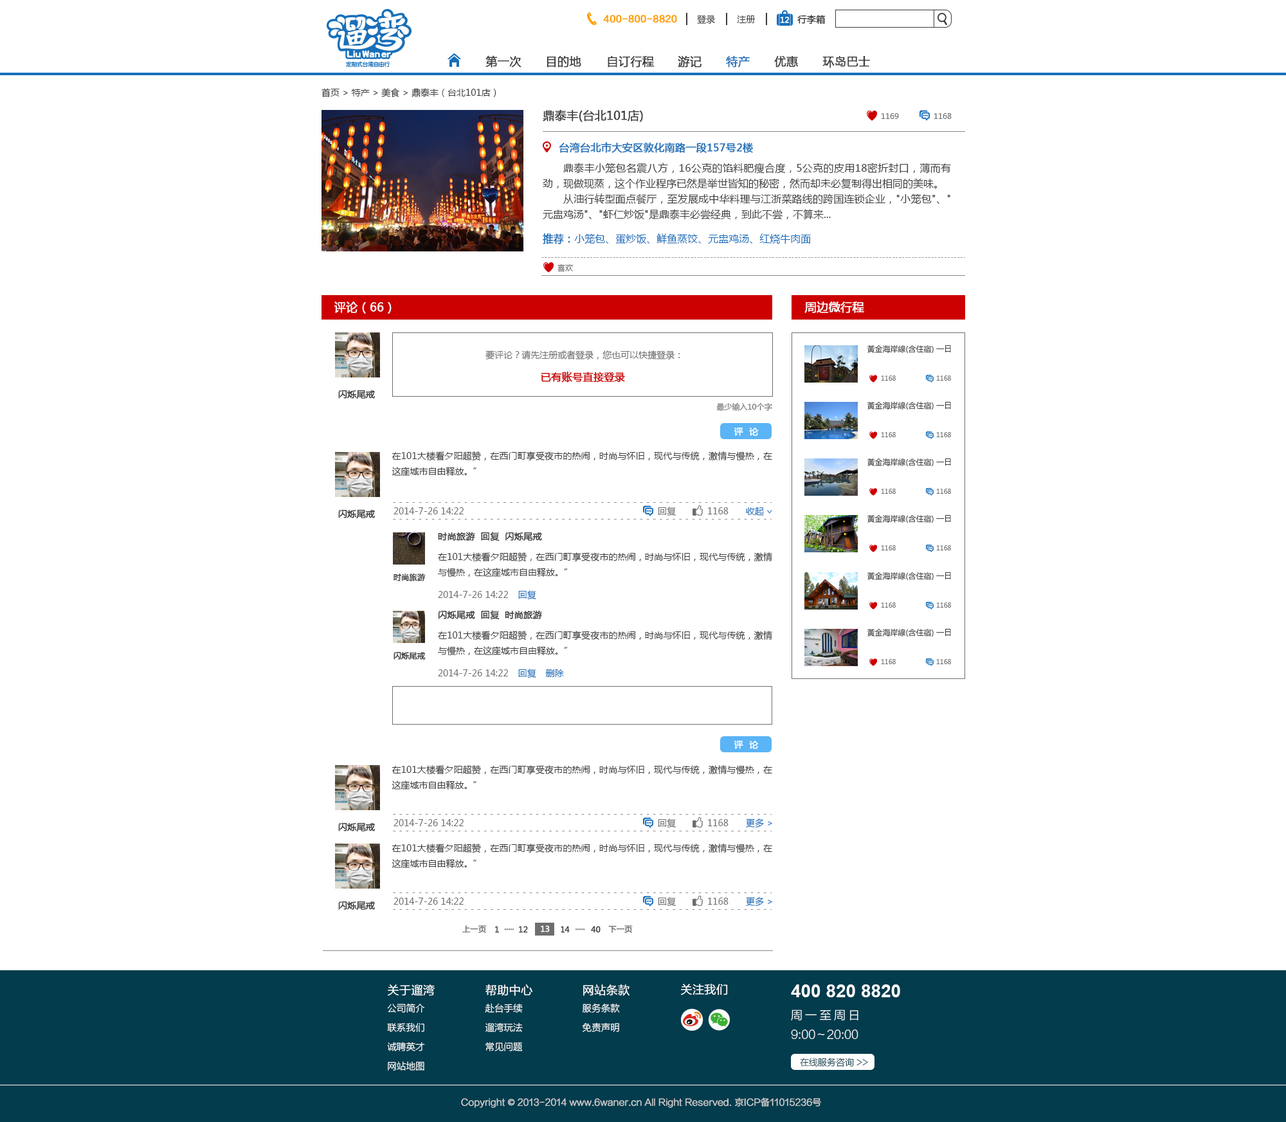
<style>
.page{position:relative;width:1286px;height:1122px;background:#ffffff}
.page>*{position:absolute;margin:0}
.t1{font:9px "FZLTZHK--GBK1-0";color:#ffa000;font-weight:bold}
.t2{font:9px "MicrosoftYaHei";color:#3c3c3c}
.t3{font:7.7px "MicrosoftYaHei";color:#fefefe;font-weight:bold}
.t4{font:9px "MicrosoftYaHei";color:#3c3c3c;font-weight:bold}
.t5{font:11.6px "MicrosoftYaHei";color:#3c3c3c;font-weight:bold}
.t6{font:11.6px "MicrosoftYaHei";color:#176fbb;font-weight:bold}
.t7{font:11.6px "MicrosoftYaHei";color:#3d3d3d;font-weight:bold}
.t8{font:7.7px "MicrosoftYaHei";color:#6e6e6e}
.t9{font:10.3px "MicrosoftYaHei";color:#1f71b9;font-weight:bold}
.t10{font:10.3px/15.4px "MicrosoftYaHei";color:#3d3d3d}
.t11{font:10.3px "MicrosoftYaHei";color:#176fbb}
.t12{font:11.6px "MicrosoftYaHei";color:#fefefe;font-weight:bold}
.t13{font:9px "MicrosoftYaHei";color:#6e6e6e}
.t14{font:7.7px "MicrosoftYaHei";color:#3c3c3c}
.t15{font:10.3px "MicrosoftYaHei";color:#cc0000;font-weight:bold}
.t16{font:6.4px "MicrosoftYaHei";color:#6e6e6e}
.t17{font:9px "MicrosoftYaHei";color:#ffffff;font-weight:bold}
.t18{font:9px/15.4px "MicrosoftYaHei";color:#3c3c3c}
.t19{font:9px "MicrosoftYaHei";color:#176fbb}
.t20{font:9.8px "MicrosoftYaHei";scale:0.71 1}
.t21{font:7.7px "MicrosoftYaHei";color:#3c3c3c;font-weight:bold}
.t22{font:7.7px "MicrosoftYaHei";color:#6e6e6e;font-weight:bold}
.t23{font:7.8px "MicrosoftYaHei";color:#3c3c3c;font-weight:bold}
.t24{font:7.7px "MicrosoftYaHei";color:#6e6e6e;font-weight:bold;scale:0.94 1}
.t25{font:7.7px "MicrosoftYaHei";color:#ffffff;font-weight:bold}
.t26{font:7.8px "MicrosoftYaHei";color:#3c3c3c;font-weight:bold;scale:0.97 1}
.t27{font:9.3px/19.3px "FZLTXHK--GBK1-0";color:#ffffff}
.t28{font:11.6px/19.3px "FZLTXHK--GBK1-0";color:#ffffff;font-weight:bold}
.t29{font:11.6px "FZLTXHK--GBK1-0";color:#ffffff;font-weight:bold}
.t30{font:18px "Arial-BoldMT";color:#ffffff}
.t31{font:11.6px/19.3px "FZLTXHK--GBK1-0";color:#ffffff}
.t32{font:11.6px/19.3px "FZLTXHK--GBK1-0";letter-spacing:0.24em;color:#ffffff}
.t33{font:9px "FZLTXHK--GBK1-0"}
.t34{font:9px "FZLTXHK--GBK1-0";color:#d0d0d0;font-weight:bold}
.t35{font:9px "AdobeHeitiStd-Regular";color:#d0d0d0;font-weight:bold}
</style>
<div class="page">
<p class="t1" style="left:603px;top:15px;width:74px;height:8px">400-800-8820</p>
<p class="t2" style="left:697px;top:15px;width:18px;height:9px">登录</p>
<p class="t2" style="left:737px;top:15px;width:18px;height:8px">注册</p>
<p class="t3" style="left:780px;top:17px;width:9px;height:6px">12</p>
<p class="t4" style="left:797px;top:15px;width:28px;height:9px">行李箱</p>
<p class="t5" style="left:485px;top:55px;width:36px;height:13px">第一次</p>
<p class="t5" style="left:546px;top:56px;width:35px;height:12px">目的地</p>
<p class="t5" style="left:608px;top:56px;width:46px;height:12px">自订行程</p>
<p class="t5" style="left:678px;top:56px;width:23px;height:12px">游记</p>
<p class="t6" style="left:726px;top:56px;width:24px;height:12px">特产</p>
<p class="t5" style="left:774px;top:56px;width:24px;height:12px">优惠</p>
<p class="t5" style="left:822px;top:56px;width:48px;height:12px">环岛巴士</p>
<p class="t2" style="left:321px;top:88px;width:175px;height:10px">首页 &gt; 特产 &gt; 美食 &gt; 鼎泰丰（台北101店）</p>
<p class="t7" style="left:543px;top:109px;width:100px;height:13px">鼎泰丰(台北101店)</p>
<p class="t8" style="left:881px;top:113px;width:18px;height:6px">1169</p>
<p class="t8" style="left:933px;top:113px;width:18px;height:6px">1168</p>
<p class="t9" style="left:559px;top:142px;width:194px;height:11px">台湾台北市大安区敦化南路一段157号2楼</p>
<p class="t10" style="left:543px;top:163px;width:408px;height:57px;text-align:justify">鼎泰丰小笼包名震八方，16公克的馅料肥瘦合度，5公克的皮用18密折封口，薄而有劲，现做现蒸，这个作业程序已然是举世皆知的秘密，然而却未必复制得出相同的美味。<br>从油行转型面点餐厅，至发展成中华料理与江浙菜路线的跨国连锁企业，"小笼包"、"元盅鸡汤"、"虾仁炒饭"是鼎泰丰必尝经典，到此不尝，不算来...</p>
<p class="t11" style="left:543px;top:233px;width:268px;height:11px"><span class="t9">推荐：</span>小笼包、蛋炒饭、鲜鱼蒸饺、元盅鸡汤、红烧牛肉面</p>
<p class="t8" style="left:557px;top:264px;width:16px;height:8px">喜欢</p>
<p class="t12" style="left:334px;top:302px;width:58px;height:12px">评论（66）</p>
<p class="t12" style="left:804px;top:302px;width:60px;height:11px">周边微行程</p>
<p class="t13" style="left:485px;top:350px;width:195px;height:9px">要评论？请先注册或者登录，您也可以快捷登录：</p>
<p class="t14" style="left:867px;top:345px;width:84px;height:8px">黃金海岸線(含住宿) 一日</p>
<p class="t15" style="left:541px;top:372px;width:84px;height:10px">已有账号直接登录</p>
<p class="t16" style="left:881px;top:375px;width:15px;height:6px">1168</p>
<p class="t16" style="left:936px;top:375px;width:15px;height:6px">1168</p>
<p class="t4" style="left:338px;top:390px;width:37px;height:9px">闪烁尾戒</p>
<p class="t14" style="left:867px;top:401px;width:84px;height:9px">黃金海岸線(含住宿) 一日</p>
<p class="t8" style="left:716px;top:402px;width:56px;height:9px">最少输入10个字</p>
<p class="t17" style="left:734px;top:428px;width:25px;height:8px">评  论</p>
<p class="t16" style="left:881px;top:432px;width:15px;height:5px">1168</p>
<p class="t16" style="left:936px;top:432px;width:15px;height:5px">1168</p>
<p class="t18" style="left:392px;top:451px;width:380px;height:25px;text-align:justify">在101大楼看夕阳超赞，在西门町享受夜市的热闹，时尚与怀旧，现代与传统，激情与慢热，在这座城市自由释放。”</p>
<p class="t14" style="left:867px;top:458px;width:84px;height:8px">黃金海岸線(含住宿) 一日</p>
<p class="t16" style="left:881px;top:489px;width:15px;height:5px">1168</p>
<p class="t16" style="left:936px;top:489px;width:15px;height:5px">1168</p>
<p class="t4" style="left:338px;top:509px;width:37px;height:10px">闪烁尾戒</p>
<p class="t13" style="left:393px;top:507px;width:71px;height:7px">2014-7-26 14:22</p>
<p class="t13" style="left:658px;top:507px;width:18px;height:9px">回复</p>
<p class="t13" style="left:708px;top:507px;width:20px;height:7px">1168</p>
<p class="t19" style="left:746px;top:507px;width:18px;height:9px">收起</p>
<p class="t20" style="left:767px;top:510px;width:5px;height:4px;rotate:90deg">&gt;</p>
<p class="t14" style="left:867px;top:514px;width:84px;height:9px">黃金海岸線(含住宿) 一日</p>
<p class="t4" style="left:438px;top:532px;width:104px;height:9px">时尚旅游  回复  闪烁尾戒</p>
<p class="t16" style="left:881px;top:545px;width:15px;height:5px">1168</p>
<p class="t16" style="left:936px;top:545px;width:15px;height:5px">1168</p>
<p class="t18" style="left:438px;top:552px;width:334px;height:25px;text-align:justify">在101大楼看夕阳超赞，在西门町享受夜市的热闹，时尚与怀旧，现代与传统，激情与慢热，在这座城市自由释放。”</p>
<p class="t21" style="left:393px;top:573px;width:33px;height:8px">时尚旅游</p>
<p class="t14" style="left:867px;top:572px;width:84px;height:8px">黃金海岸線(含住宿) 一日</p>
<p class="t13" style="left:438px;top:591px;width:70px;height:7px">2014-7-26 14:22</p>
<p class="t19" style="left:518px;top:590px;width:18px;height:10px">回复</p>
<p class="t16" style="left:881px;top:602px;width:15px;height:6px">1168</p>
<p class="t16" style="left:936px;top:602px;width:15px;height:6px">1168</p>
<p class="t4" style="left:438px;top:610px;width:104px;height:10px">闪烁尾戒  回复  时尚旅游</p>
<p class="t14" style="left:867px;top:628px;width:84px;height:8px">黃金海岸線(含住宿) 一日</p>
<p class="t18" style="left:438px;top:631px;width:334px;height:25px;text-align:justify">在101大楼看夕阳超赞，在西门町享受夜市的热闹，时尚与怀旧，现代与传统，激情与慢热，在这座城市自由释放。”</p>
<p class="t21" style="left:393px;top:651px;width:33px;height:9px">闪烁尾戒</p>
<p class="t16" style="left:881px;top:659px;width:15px;height:5px">1168</p>
<p class="t16" style="left:936px;top:659px;width:15px;height:5px">1168</p>
<p class="t13" style="left:438px;top:669px;width:70px;height:7px">2014-7-26 14:22</p>
<p class="t19" style="left:518px;top:669px;width:18px;height:9px">回复</p>
<p class="t19" style="left:545px;top:669px;width:19px;height:8px">删除</p>
<p class="t17" style="left:734px;top:741px;width:25px;height:8px">评  论</p>
<p class="t18" style="left:392px;top:765px;width:380px;height:25px;text-align:justify">在101大楼看夕阳超赞，在西门町享受夜市的热闹，时尚与怀旧，现代与传统，激情与慢热，在这座城市自由释放。”</p>
<p class="t13" style="left:393px;top:819px;width:71px;height:7px">2014-7-26 14:22</p>
<p class="t13" style="left:658px;top:818px;width:18px;height:10px">回复</p>
<p class="t13" style="left:708px;top:819px;width:20px;height:7px">1168</p>
<p class="t19" style="left:746px;top:818px;width:26px;height:10px">更多 &gt;</p>
<p class="t4" style="left:338px;top:822px;width:37px;height:10px">闪烁尾戒</p>
<p class="t18" style="left:392px;top:843px;width:380px;height:26px;text-align:justify">在101大楼看夕阳超赞，在西门町享受夜市的热闹，时尚与怀旧，现代与传统，激情与慢热，在这座城市自由释放。”</p>
<p class="t4" style="left:338px;top:901px;width:37px;height:9px">闪烁尾戒</p>
<p class="t13" style="left:393px;top:897px;width:71px;height:8px">2014-7-26 14:22</p>
<p class="t13" style="left:658px;top:897px;width:18px;height:9px">回复</p>
<p class="t13" style="left:708px;top:897px;width:20px;height:8px">1168</p>
<p class="t19" style="left:746px;top:897px;width:26px;height:9px">更多 &gt;</p>
<p class="t22" style="left:462px;top:925px;width:24px;height:8px">上一页</p>
<p class="t23" style="left:495px;top:926px;width:5px;height:7px">1</p>
<p class="t24" style="left:504px;top:928px;width:10px;height:2px;rotate:180deg">.....</p>
<p class="t23" style="left:519px;top:926px;width:9px;height:7px">12</p>
<p class="t25" style="left:541px;top:925px;width:9px;height:7px">13</p>
<p class="t26" style="left:561px;top:926px;width:9px;height:7px">14</p>
<p class="t24" style="left:575px;top:928px;width:10px;height:2px;rotate:180deg">.....</p>
<p class="t26" style="left:591px;top:926px;width:9px;height:7px">40</p>
<p class="t22" style="left:608px;top:925px;width:25px;height:8px">下一页</p>
<p class="t27" style="left:387px;top:984px;width:48px;height:86px"><span class="t28">关于遛湾<br></span>公司简介<br>联系我们<br>诚聘英才<br>网站地图</p>
<p class="t27" style="left:485px;top:984px;width:47px;height:67px"><span class="t28">帮助中心<br></span>赴台手续 <br>遛湾玩法 <br>常见问题</p>
<p class="t27" style="left:582px;top:984px;width:47px;height:48px"><span class="t28">网站条款 <br></span>服务条款<br>免责声明</p>
<p class="t29" style="left:681px;top:984px;width:47px;height:11px">关注我们</p>
<p class="t30" style="left:791px;top:984px;width:109px;height:13px">400 820 8820</p>
<p class="t31" style="left:791px;top:1009px;width:67px;height:30px"><span class="t32">周一至周日<br></span>9:00～20:00</p>
<p class="t33" style="left:800px;top:1058px;width:68px;height:8px">在线服务咨询 &gt;&gt;</p>
<p class="t34" style="left:461px;top:1097px;width:361px;height:11px">Copyright <span class="t35">©</span> 2013-2014 www.6waner.cn All Right Reserved. 京ICP备11015236号</p>
</div>
